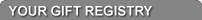
<style>
.page{position:relative;width:202px;height:20px;background:#858585}
.page>*{position:absolute;margin:0}
.t1{font:13.3px "Arial-BoldMT";color:#ffffff}
</style>
<div class="page">
<p class="t1" style="left:8px;top:5px;width:144px;height:11px">YOUR GIFT REGISTRY</p>
</div>
